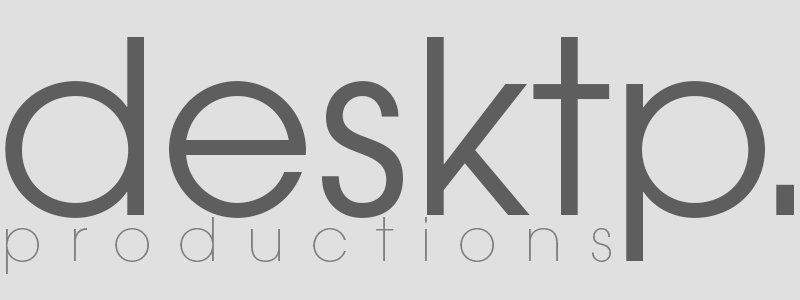
<style>
.page{position:relative;width:800px;height:300px;background:#e0e0e0}
.page>*{position:absolute;margin:0}
.t1{font:240px "ITCAvantGardePro-Bk";color:#5e5e5e}
.t2{font:60px "ITCAvantGardePro-XLt";letter-spacing:0.45em;color:#7f7f7f}
</style>
<div class="page">
<p class="t1" style="left:5px;top:37px;width:760px;height:224px">desktp</p>
<p class="t1" style="left:776px;top:184px;width:18px;height:31px">.</p>
<p class="t2" style="left:6px;top:217px;width:605px;height:57px">productions</p>
</div>
